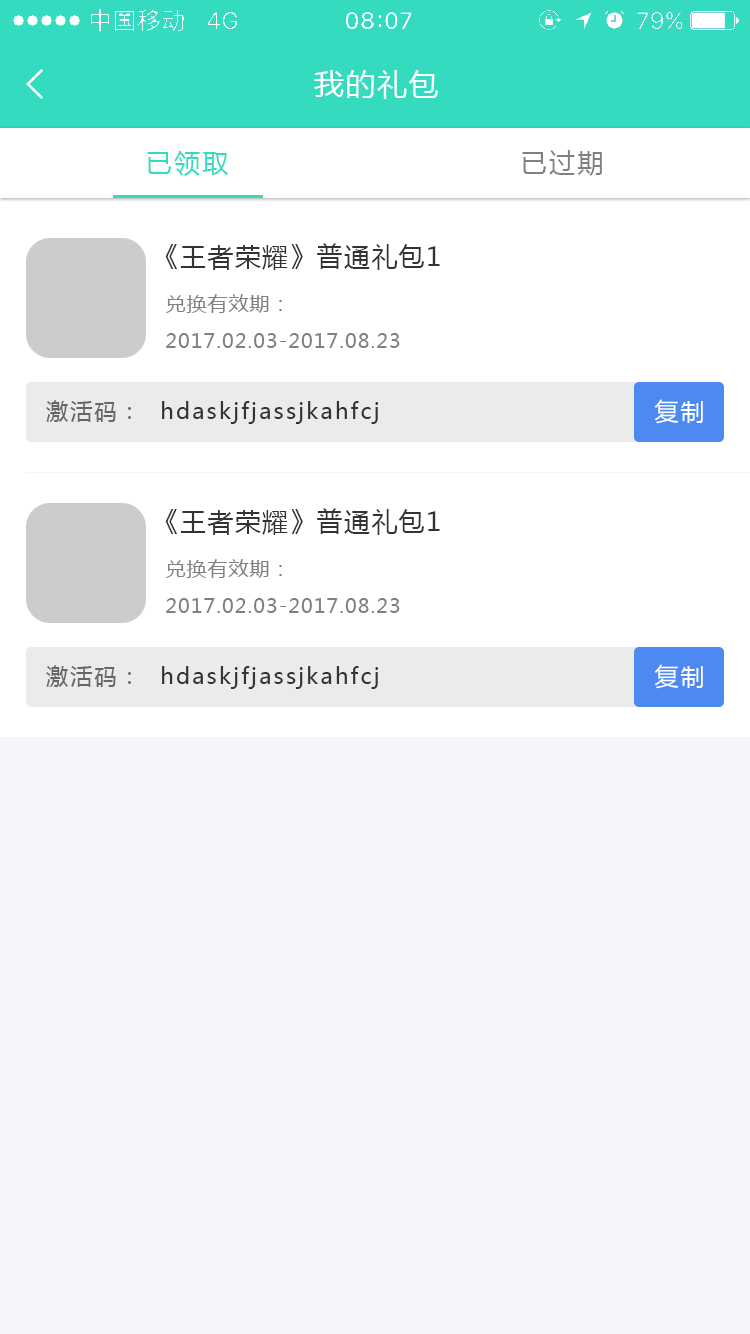
<style>
.page{position:relative;width:750px;height:1334px;background:#f6f5fa}
.page>*{position:absolute;margin:0}
.t1{font:30px "MicrosoftYaHei";letter-spacing:0.05em;color:#ffffff}
.t2{font:26px "MicrosoftYaHei";letter-spacing:0.09em;color:#808080}
.t3{font:26px "MicrosoftYaHei";letter-spacing:0.09em;color:#34dbbf}
.t4{font:26px "MicrosoftYaHei";letter-spacing:0.05em;color:#333333}
.t5{font:20px "MicrosoftYaHei";letter-spacing:0.05em;color:#808080}
.t6{font:22px "MicrosoftYaHei";letter-spacing:0.1em;color:#333333}
.t7{font:22px "MicrosoftYaHei";letter-spacing:0.1em;color:#666666}
.t8{font:24px "MicrosoftYaHei";letter-spacing:0.1em;color:#ffffff}
</style>
<div class="page">
<p class="t1" style="left:314px;top:70px;width:124px;height:29px">我的礼包</p>
<p class="t2" style="left:522px;top:150px;width:80px;height:26px">已过期</p>
<p class="t3" style="left:147px;top:151px;width:82px;height:25px">已领取</p>
<p class="t4" style="left:165px;top:243px;width:275px;height:27px">《王者荣耀》普通礼包1</p>
<p class="t5" style="left:165px;top:294px;width:117px;height:19px">兑换有效期：</p>
<p class="t5" style="left:166px;top:333px;width:234px;height:15px">2017.02.03-2017.08.23</p>
<p class="t6" style="left:46px;top:400px;width:333px;height:24px"><span class="t7">激活码：  </span>hdaskjfjassjkahfcj</p>
<p class="t8" style="left:654px;top:399px;width:49px;height:25px">复制</p>
<p class="t4" style="left:165px;top:508px;width:275px;height:27px">《王者荣耀》普通礼包1</p>
<p class="t5" style="left:165px;top:559px;width:117px;height:19px">兑换有效期：</p>
<p class="t5" style="left:166px;top:598px;width:234px;height:15px">2017.02.03-2017.08.23</p>
<p class="t6" style="left:46px;top:665px;width:333px;height:24px"><span class="t7">激活码：  </span>hdaskjfjassjkahfcj</p>
<p class="t8" style="left:654px;top:664px;width:49px;height:25px">复制</p>
</div>
